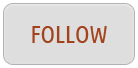
<style>
.page{position:relative;width:138px;height:68px;background:#dedede}
.page>*{position:absolute;margin:0}
.t1{font:24px "UbuntuCondensed-Regular";color:#a3431d}
</style>
<div class="page">
<p class="t1" style="left:32px;top:26px;width:75px;height:17px">FOLLOW</p>
</div>
